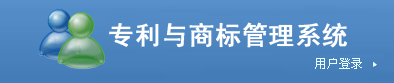
<style>
.page{position:relative;width:394px;height:83px}
.page>*{position:absolute;margin:0}
.t1{font:26px "SimHei";color:#ffffff;font-weight:bold}
</style>
<div class="page">
<p class="t1" style="left:109px;top:22px;width:238px;height:26px">专利与商标管理系统</p>
</div>
